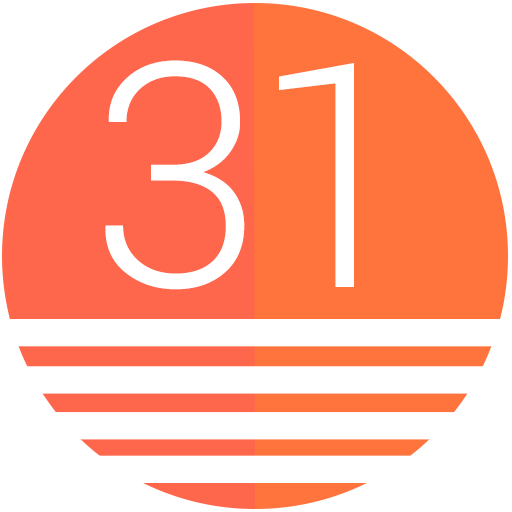
<style>
.page{position:relative;width:512px;height:512px;background:#ffffff}
.page>*{position:absolute;margin:0}
.t1{font:312.5px "Roboto-Light";letter-spacing:-0.04em;color:#ffffff}
</style>
<div class="page">
<p class="t1" style="left:105px;top:60px;width:249px;height:230px">31</p>
</div>
